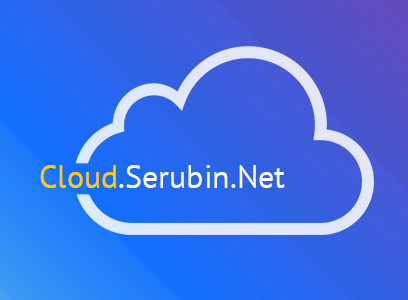
<style>
.page{position:relative;width:408px;height:300px}
.page>*{position:absolute;margin:0}
.t1{font:32px "PTSans-Regular";color:#ffffff}
.t2{font:32px "PTSans-Regular";color:#ffcc04}
</style>
<div class="page">
<p class="t1" style="left:40px;top:165px;width:245px;height:23px"><span class="t2">Cloud</span>.Serubin.Net</p>
</div>
